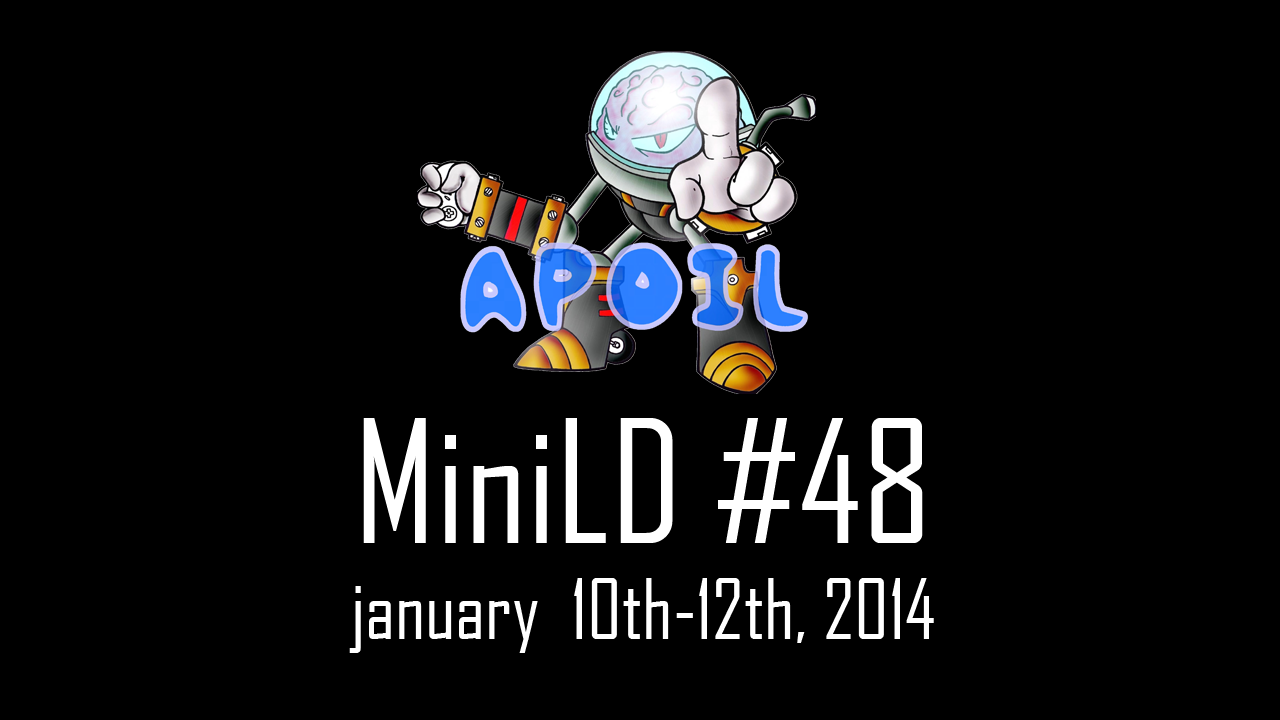
<style>
.page{position:relative;width:1280px;height:720px;background:#000000}
.page>*{position:absolute;margin:0}
.t1{font:80px "AgencyFB-Reg";color:#ffffff}
.t2{font:163.5px "AgencyFB-Reg";color:#ffffff}
</style>
<div class="page">
<p class="t1" style="left:349px;top:418px;width:585px;height:235px;text-align:center"><span class="t2">MiniLD #48<br></span>january  10th-12th, 2014</p>
</div>
